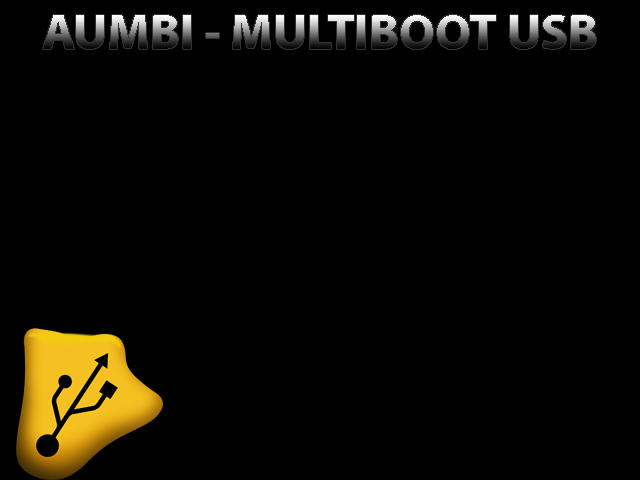
<style>
.page{position:relative;width:640px;height:480px;background:#000000}
.page>*{position:absolute;margin:0}
.t1{font:50px "MyriadPro-Bold"}
</style>
<div class="page">
<p class="t1" style="left:43px;top:15px;width:553px;height:34px">AUMBI - MULTIBOOT USB</p>
</div>
